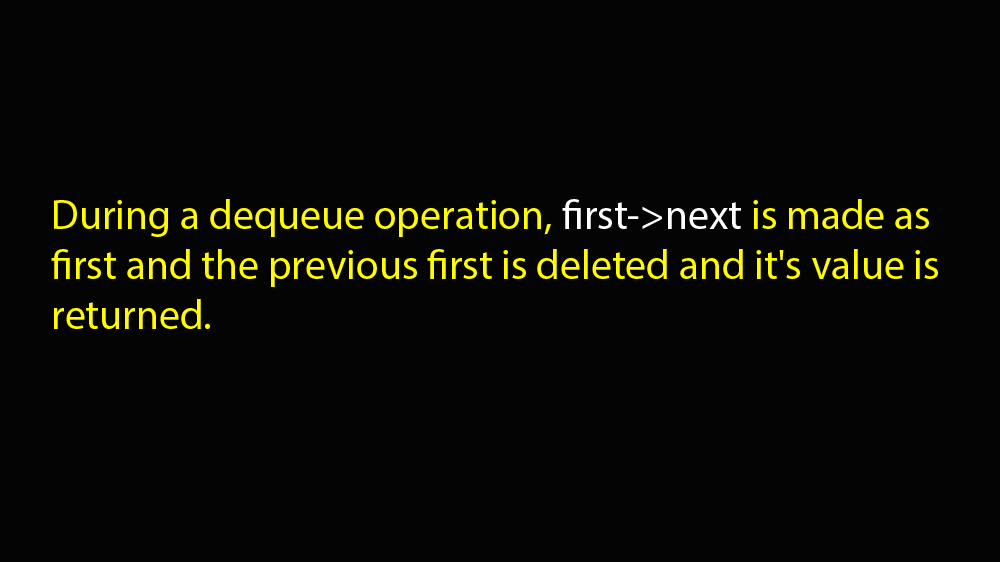
<style>
.page{position:relative;width:1000px;height:562px;background:#050404}
.page>*{position:absolute;margin:0}
.t1{font:41.7px "MyriadPro-Regular";color:#fefb04}
.t2{font:41.7px "MyriadPro-Regular";color:#ffffff}
</style>
<div class="page">
<p class="t1" style="left:51px;top:199px;width:887px;height:130px">During a dequeue operation, <span class="t2">first-&gt;next</span> is made as first and the previous first is deleted and it's value is returned.</p>
</div>
